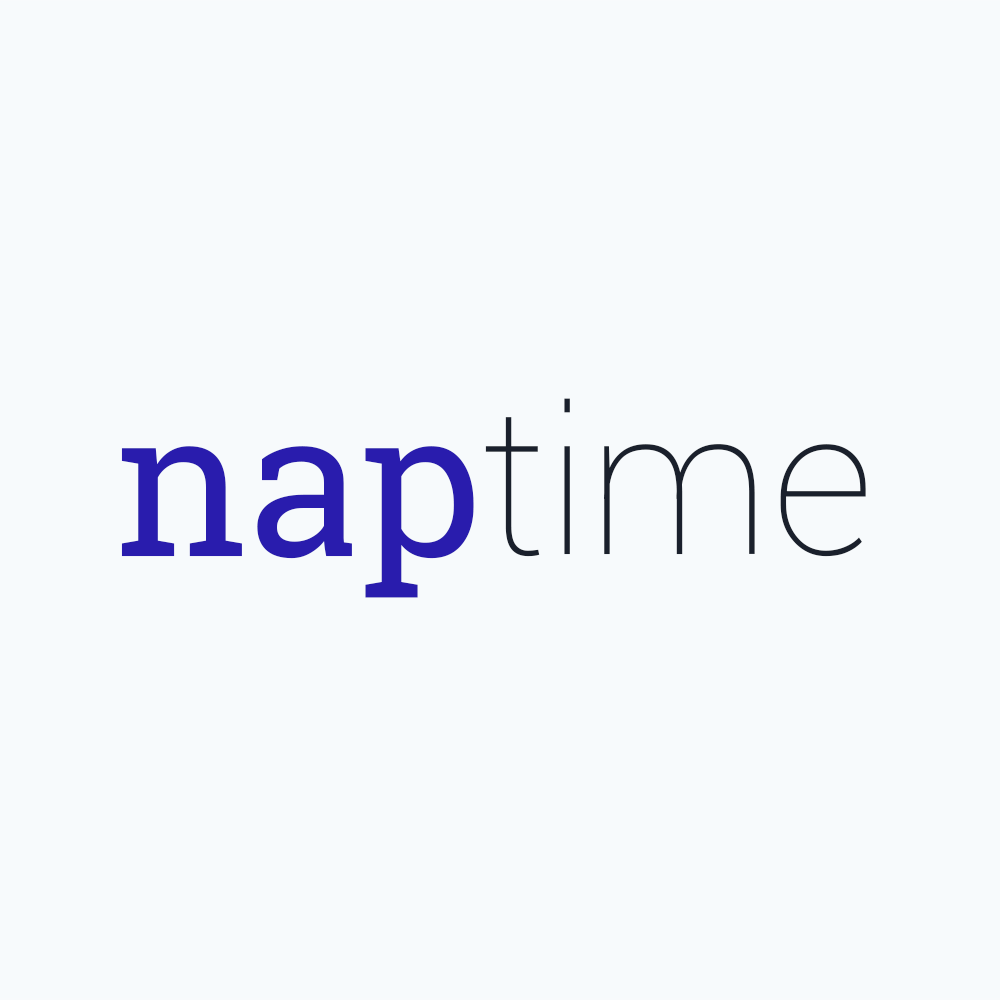
<style>
.page{position:relative;width:1000px;height:1000px;background:#f7fafc}
.page>*{position:absolute;margin:0}
.t1{font:203.6px "Roboto-Thin";color:#1a202c}
.t2{font:203.6px "RobotoSlab-Regular";color:#291cad}
</style>
<div class="page">
<p class="t1" style="left:485px;top:398px;width:381px;height:159px">time</p>
<p class="t2" style="left:121px;top:446px;width:353px;height:152px">nap</p>
</div>
